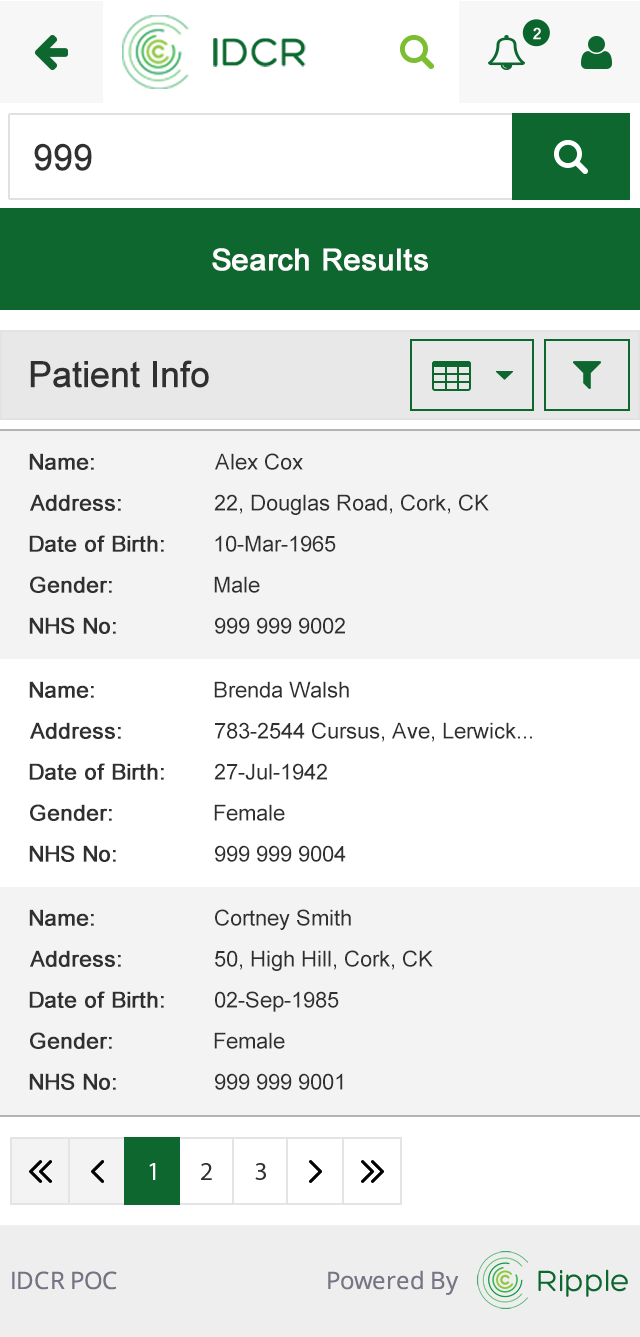
<style>
.page{position:relative;width:640px;height:1337px;background:#f3f3f3}
.page>*{position:absolute;margin:0}
.t1{font:36px "ArialMT";color:#313131;font-weight:bold}
.t2{font:30px "ArialMT";color:#ffffff;font-weight:bold}
.t3{font:36px "ArialMT";color:#303030;font-weight:bold}
.t4{font:22px "ArialMT";color:#303030;font-weight:bold}
.t5{font:22px "ArialMT";color:#303030}
</style>
<div class="page">
<p class="t1" style="left:34px;top:143px;width:58px;height:28px">999</p>
<p class="t2" style="left:212px;top:248px;width:216px;height:23px">Search Results</p>
<p class="t3" style="left:30px;top:360px;width:179px;height:28px">Patient Info</p>
<p class="t4" style="left:29px;top:453px;width:65px;height:17px">Name:</p>
<p class="t5" style="left:215px;top:453px;width:88px;height:17px">Alex Cox</p>
<p class="t4" style="left:30px;top:494px;width:91px;height:17px">Address:</p>
<p class="t5" style="left:214px;top:494px;width:275px;height:21px">22, Douglas Road, Cork, CK</p>
<p class="t4" style="left:29px;top:535px;width:135px;height:17px">Date of Birth:</p>
<p class="t5" style="left:215px;top:535px;width:121px;height:17px">10-Mar-1965</p>
<p class="t4" style="left:30px;top:576px;width:82px;height:17px">Gender:</p>
<p class="t5" style="left:214px;top:576px;width:46px;height:17px">Male</p>
<p class="t4" style="left:29px;top:617px;width:87px;height:17px">NHS No:</p>
<p class="t5" style="left:215px;top:617px;width:130px;height:17px">999 999 9002</p>
<p class="t4" style="left:29px;top:681px;width:65px;height:17px">Name:</p>
<p class="t5" style="left:214px;top:681px;width:135px;height:17px">Brenda Walsh</p>
<p class="t4" style="left:30px;top:722px;width:91px;height:17px">Address:</p>
<p class="t5" style="left:215px;top:722px;width:317px;height:20px">783-2544 Cursus, Ave, Lerwick...</p>
<p class="t4" style="left:29px;top:763px;width:135px;height:17px">Date of Birth:</p>
<p class="t5" style="left:214px;top:763px;width:113px;height:17px">27-Jul-1942</p>
<p class="t4" style="left:30px;top:804px;width:82px;height:17px">Gender:</p>
<p class="t5" style="left:214px;top:804px;width:71px;height:17px">Female</p>
<p class="t4" style="left:29px;top:845px;width:87px;height:17px">NHS No:</p>
<p class="t5" style="left:215px;top:845px;width:131px;height:17px">999 999 9004</p>
<p class="t4" style="left:29px;top:909px;width:65px;height:17px">Name:</p>
<p class="t5" style="left:215px;top:909px;width:136px;height:21px">Cortney Smith</p>
<p class="t4" style="left:30px;top:950px;width:91px;height:17px">Address:</p>
<p class="t5" style="left:215px;top:950px;width:218px;height:21px">50, High Hill, Cork, CK</p>
<p class="t4" style="left:29px;top:991px;width:135px;height:17px">Date of Birth:</p>
<p class="t5" style="left:215px;top:991px;width:124px;height:21px">02-Sep-1985</p>
<p class="t4" style="left:30px;top:1032px;width:82px;height:17px">Gender:</p>
<p class="t5" style="left:214px;top:1032px;width:71px;height:17px">Female</p>
<p class="t4" style="left:29px;top:1073px;width:87px;height:17px">NHS No:</p>
<p class="t5" style="left:215px;top:1073px;width:128px;height:17px">999 999 9001</p>
</div>
